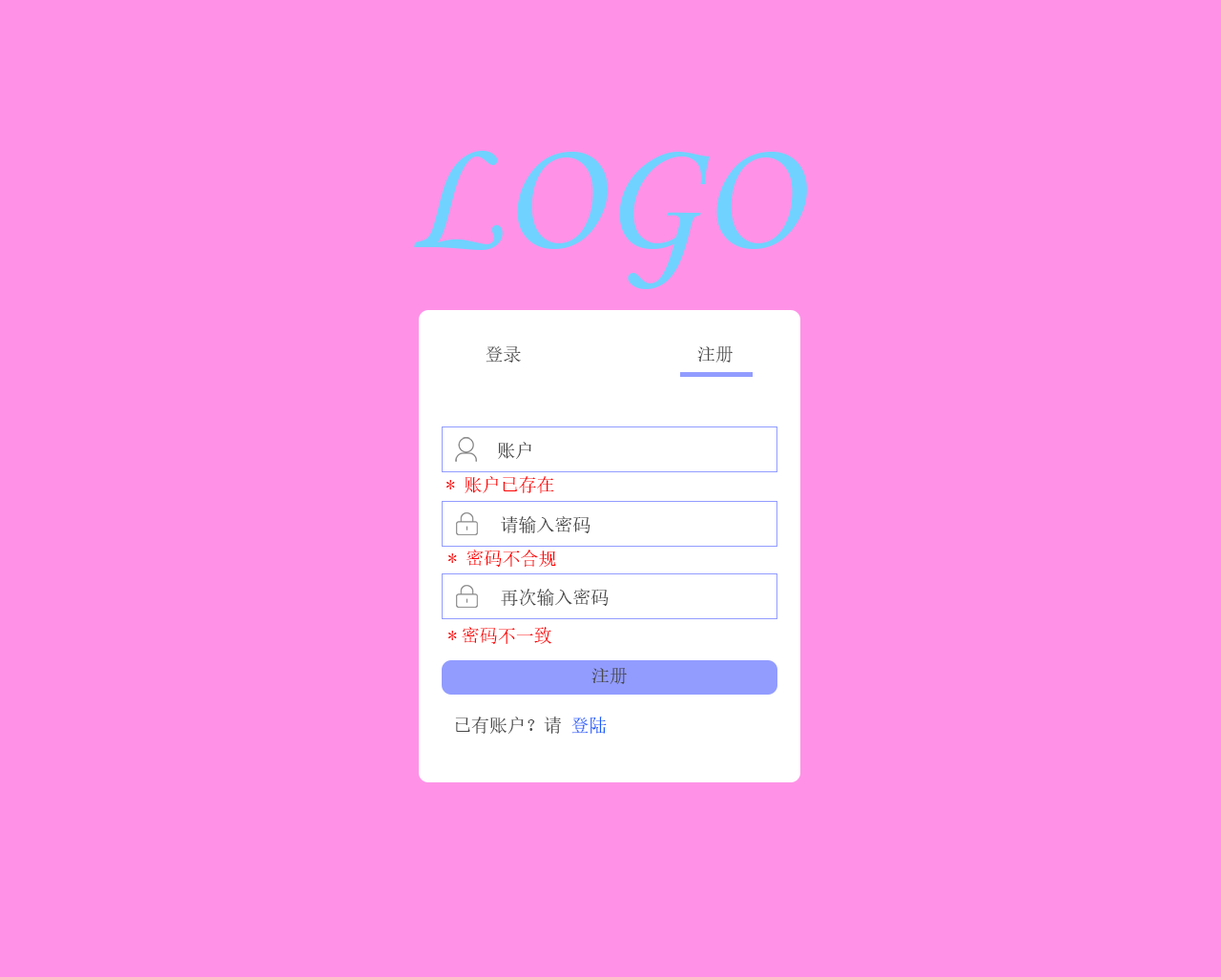
<style>
.page{position:relative;width:1221px;height:977px;background:#ff92e7}
.page>*{position:absolute;margin:0}
.t1{font:18.1px "SimSun";color:#474747}
.t2{font:18.1px "SimSun";color:#ff0000}
.t3{font:18.1px "SimSun";color:#195afe}
</style>
<div class="page">
<p class="t1" style="left:485px;top:345px;width:36px;height:17px">登录</p>
<p class="t1" style="left:697px;top:346px;width:36px;height:16px">注册</p>
<p class="t1" style="left:498px;top:442px;width:33px;height:17px">账户</p>
<p class="t2" style="left:446px;top:476px;width:108px;height:17px">* 账户已存在</p>
<p class="t1" style="left:501px;top:516px;width:89px;height:17px">请输入密码</p>
<p class="t2" style="left:448px;top:549px;width:108px;height:18px">* 密码不合规</p>
<p class="t1" style="left:501px;top:589px;width:108px;height:17px">再次输入密码</p>
<p class="t2" style="left:448px;top:627px;width:104px;height:17px">*密码不一致</p>
<p class="t1" style="left:591px;top:668px;width:36px;height:16px">注册</p>
<p class="t1" style="left:455px;top:716px;width:152px;height:17px">已有账户？请 <span class="t3">登陆</span></p>
</div>
